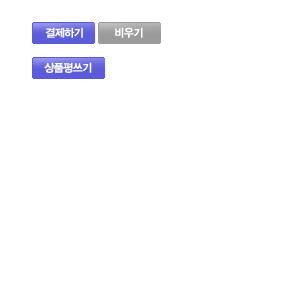
<style>
.page{position:relative;width:300px;height:300px;background:#ffffff}
.page>*{position:absolute;margin:0}
.t1{font:11.1px "YDIYGO140-KSCPC-EUC-H";letter-spacing:-0.12em;color:#ffffff}
</style>
<div class="page">
<p class="t1" style="left:45px;top:27px;width:38px;height:11px">결제하기</p>
<p class="t1" style="left:115px;top:27px;width:28px;height:11px">비우기</p>
<p class="t1" style="left:44px;top:62px;width:48px;height:11px">상품평쓰기</p>
</div>
